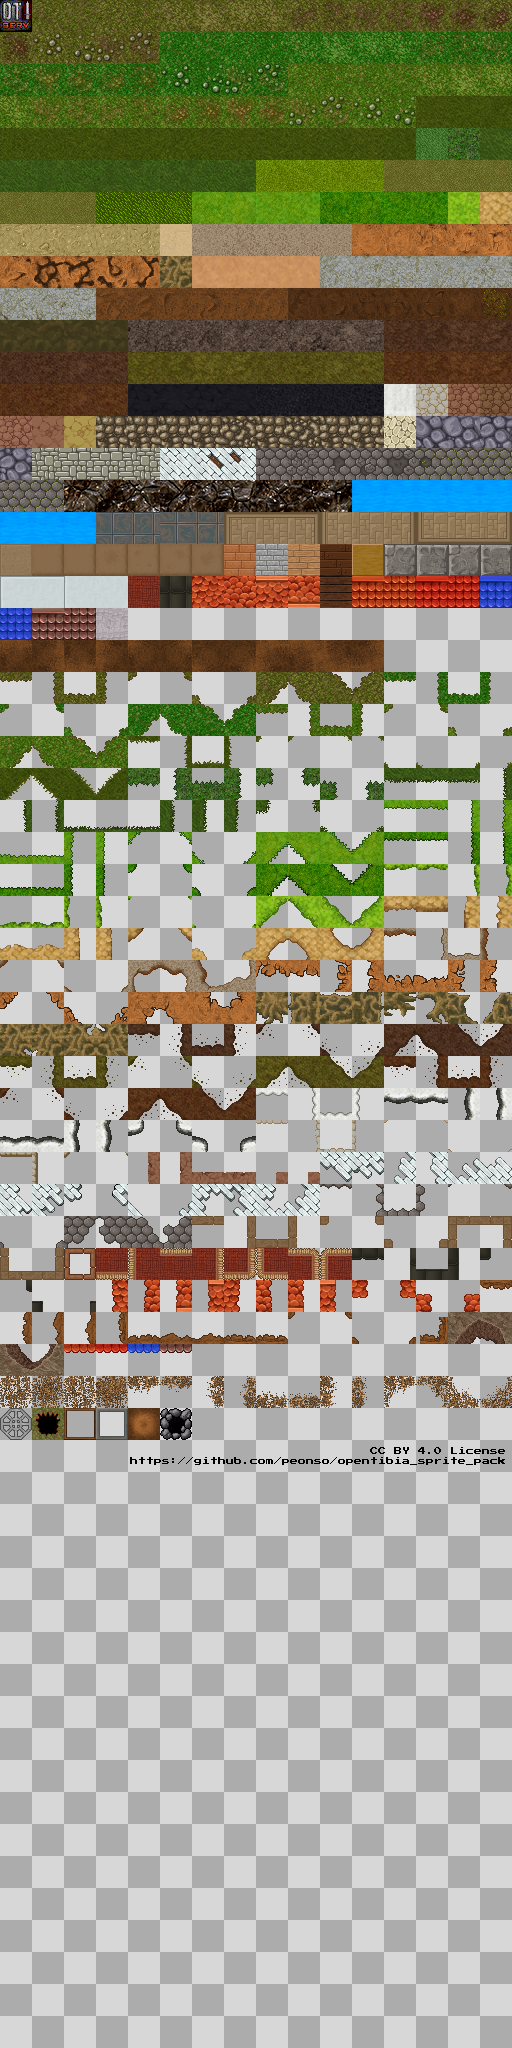
<style>
.page{position:relative;width:512px;height:2048px;background:#d7d7d7}
.page>*{position:absolute;margin:0}
.t1{font:8px "PressStart2P";color:#000000}
</style>
<div class="page">
<p class="t1" style="left:130px;top:1447px;width:375px;height:18px;text-align:right">CC BY 4.0 License<br>https://github.com/peonso/opentibia_sprite_pack</p>
</div>
